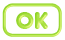
<style>
.page{position:relative;width:65px;height:40px;background:#ffffff}
.page>*{position:absolute;margin:0}
.t1{font:24px "Junegull-Regular"}
</style>
<div class="page">
<p class="t1" style="left:16px;top:12px;width:32px;height:17px">OK</p>
</div>
